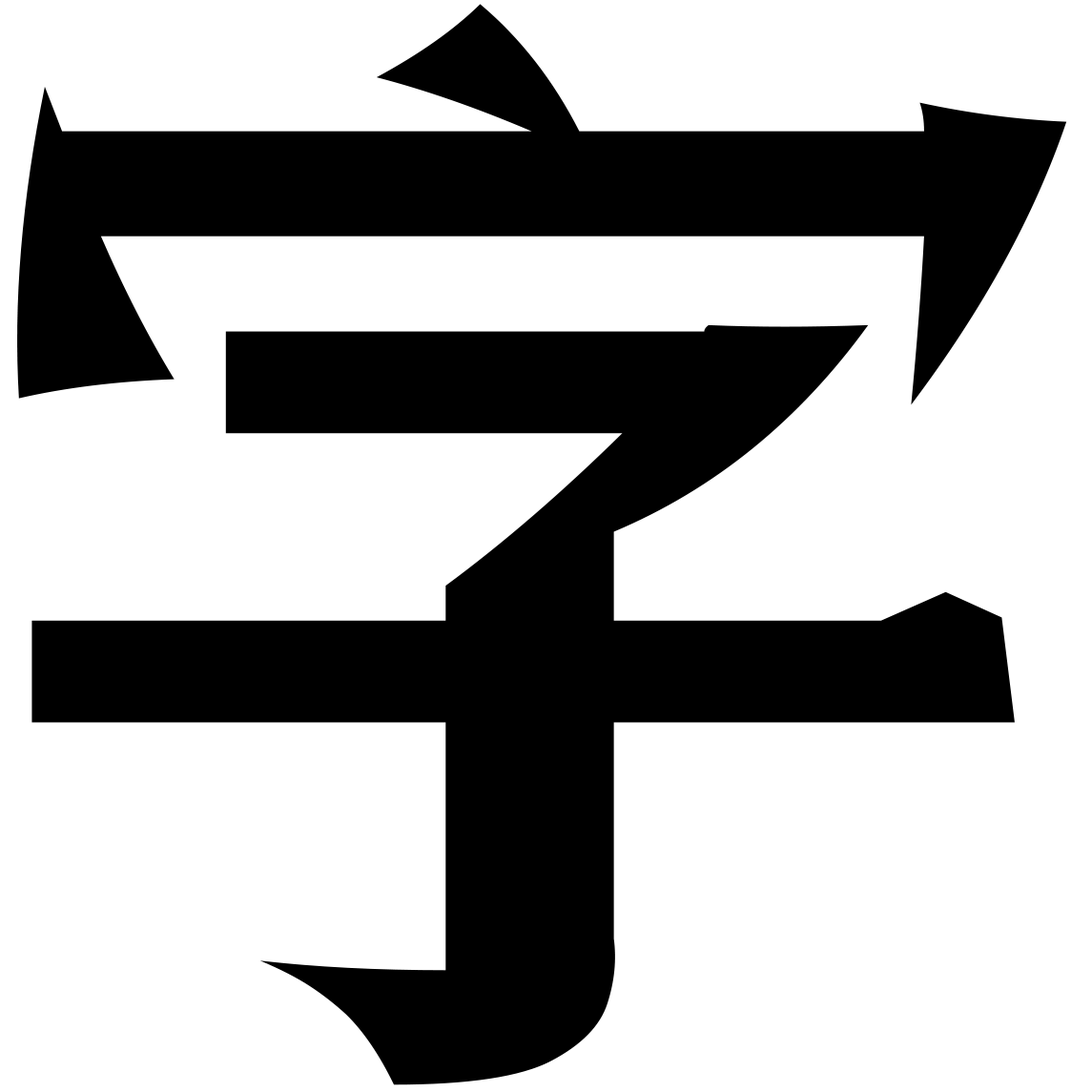
<style>
.page{position:relative;width:1092px;height:1092px;background:#ffffff}
.page>*{position:absolute;margin:0}
.t1{font:813.9px "ZoomlaMalieA038";color:#000000;text-transform:uppercase;scale:1.36 1}
</style>
<div class="page">
<p class="t1" style="left:17px;top:4px;width:1050px;height:1081px">字</p>
</div>
